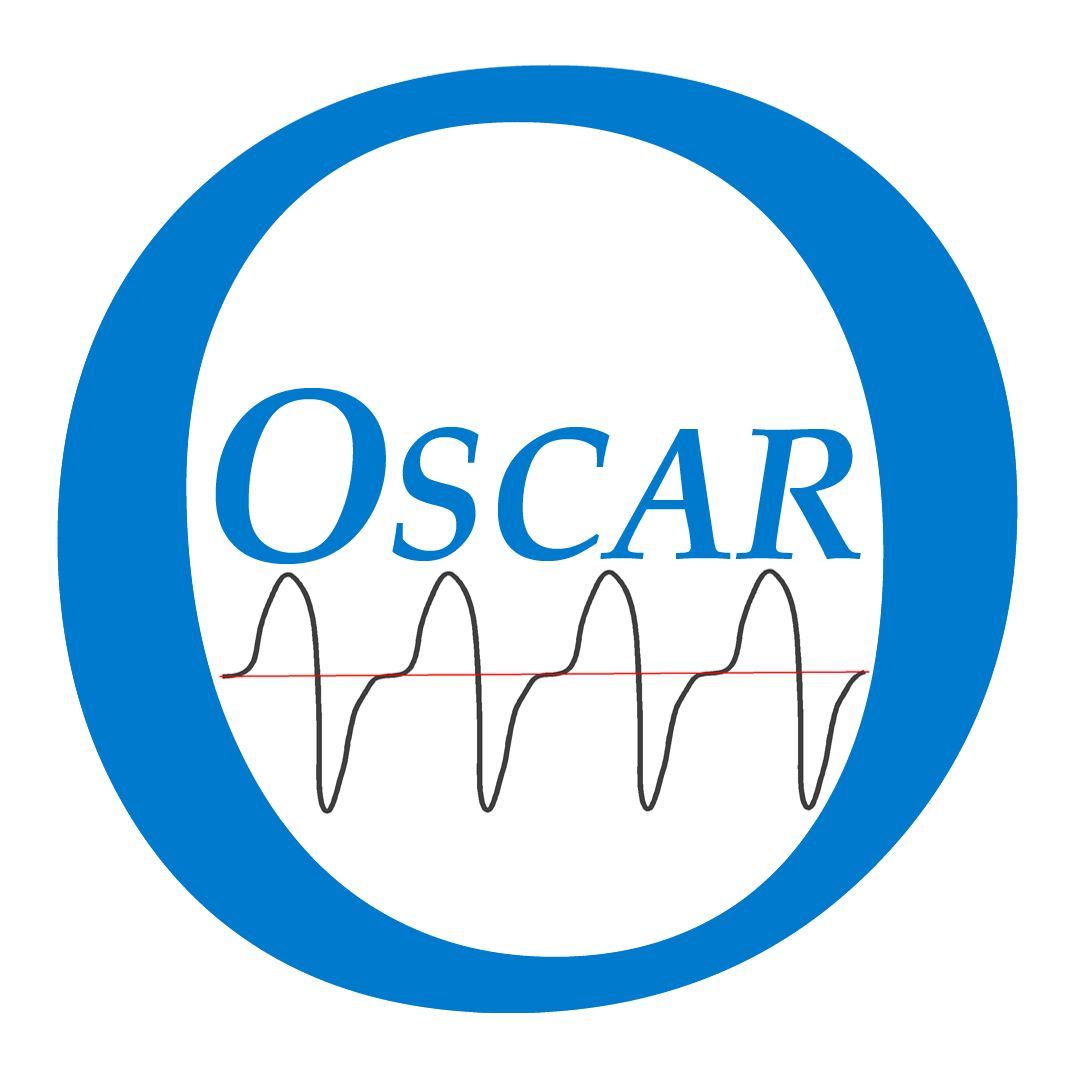
<style>
.page{position:relative;width:1079px;height:1079px;background:#ffffff}
.page>*{position:absolute;margin:0}
.t1{font:1325.5px "BookAntiqua";color:#007acc}
.t2{font:250.6px "BookAntiqua-BoldItalic";color:#007acc;scale:0.95 1}
.t3{font:189.2px "BookAntiqua-BoldItalic";color:#007acc;scale:0.95 1}
</style>
<div class="page">
<p class="t1" style="left:57px;top:65px;width:961px;height:948px">O</p>
<p class="t2" style="left:215px;top:388px;width:171px;height:176px">O</p>
<p class="t3" style="left:392px;top:427px;width:469px;height:134px">SCAR</p>
</div>
